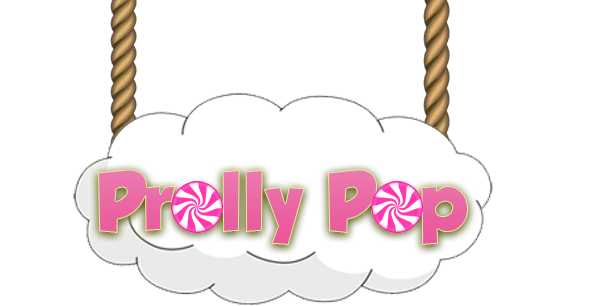
<style>
.page{position:relative;width:600px;height:306px;background:#ffffff}
.page>*{position:absolute;margin:0}
.t1{font:75px "GROBOLD"}
</style>
<div class="page">
<p class="t1" style="left:98px;top:169px;width:370px;height:76px">Prolly Pop</p>
</div>
